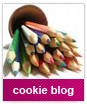
<style>
.page{position:relative;width:87px;height:104px}
.page>*{position:absolute;margin:0}
.t1{font:11px "Arial-BoldMT";color:#fefefe}
</style>
<div class="page">
<p class="t1" style="left:13px;top:86px;width:61px;height:10px">cookie blog</p>
</div>
